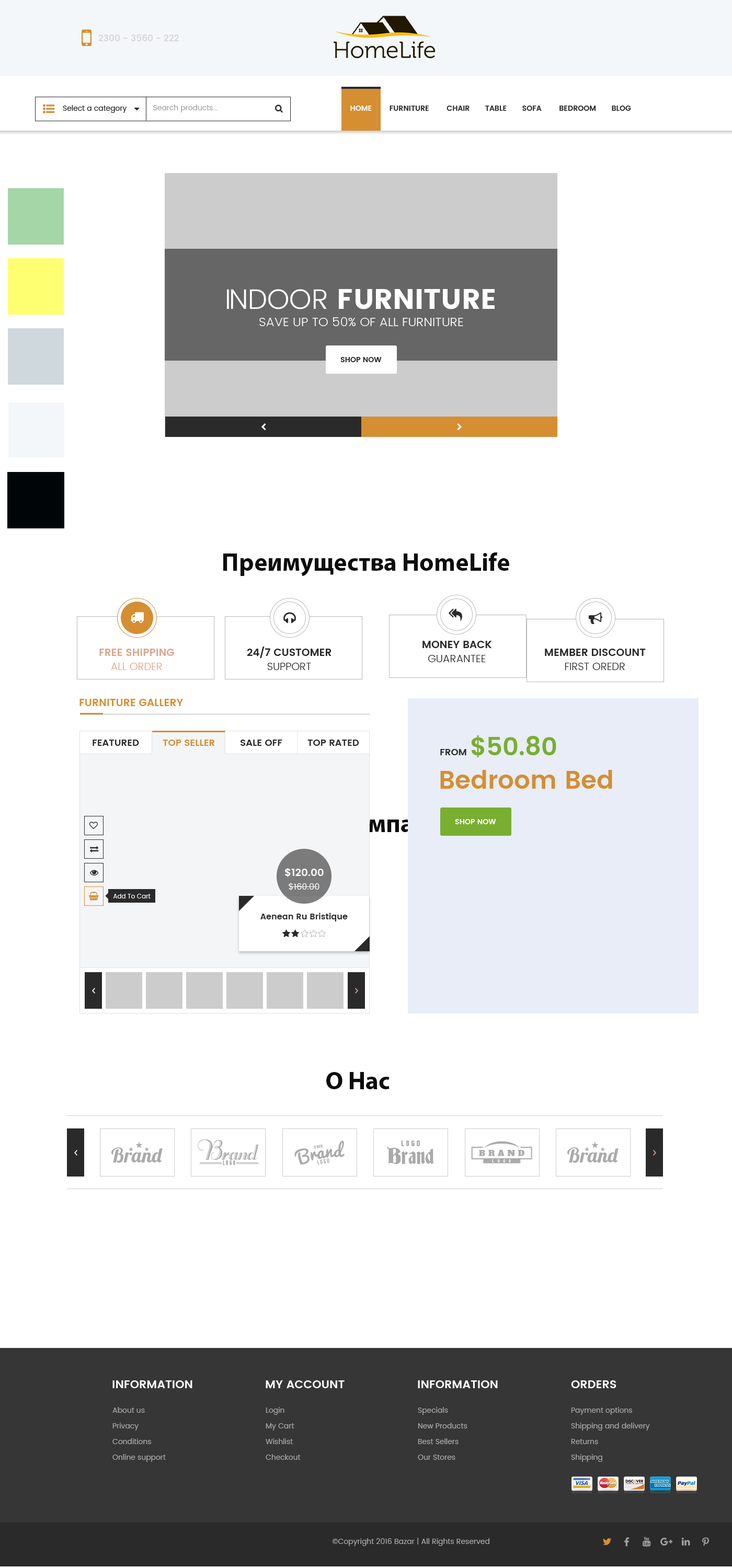
<style>
.page{position:relative;width:732px;height:1568px;background:#ffffff}
.page>*{position:absolute;margin:0}
.t1{font:8.9px "Poppins-SemiBold";color:#d8d8d8}
.t2{font:7.3px "Poppins-Regular";color:#2a2a2a}
.t3{font:7.3px "Poppins-Regular";color:#a4a4a4}
.t4{font:7.3px "Poppins-SemiBold";color:#2a2a2a;text-transform:uppercase}
.t5{font:7.3px "Poppins-SemiBold";color:#ffffff;text-transform:uppercase}
.t6{font:28.2px "Poppins";color:#ffffff;text-transform:uppercase}
.t7{font:28.2px "Poppins-Light";letter-spacing:-0.086em;color:#ffffff;text-transform:uppercase}
.t8{font:28.2px "Poppins-Light";color:#ffffff;text-transform:uppercase}
.t9{font:12.5px "Poppins-Light";color:#ffffff;text-transform:uppercase}
.t10{font:25.1px "MyriadPro-Bold";color:#0c0d0c}
.t11{font:10.5px/14.1px "Poppins-SemiBold";color:#2a2a2a;text-transform:uppercase}
.t12{font:10.5px/14.1px "Poppins-Light";color:#2a2a2a;text-transform:uppercase}
.t13{font:10.5px/14.1px "Poppins-SemiBold";color:#e0a38e;text-transform:uppercase}
.t14{font:10.5px/14.1px "Poppins-Light";color:#e0a38e;text-transform:uppercase}
.t15{font:10.5px "Poppins-SemiBold";color:#d58e32;text-transform:uppercase}
.t16{font:25.1px "Poppins-SemiBold";color:#79ae30;text-transform:uppercase}
.t17{font:9.4px "Poppins-SemiBold";color:#2a2a2a;text-transform:uppercase}
.t18{font:9.4px "Poppins-SemiBold";color:#d58e32;text-transform:uppercase}
.t19{font:25.1px "Poppins-SemiBold";color:#d58e32}
.t20{font:25.1px "MyriadPro-Bold"}
.t21{font:10.5px "Poppins-SemiBold";color:#ffffff;text-transform:uppercase}
.t22{font:6.3px "Poppins-Regular";color:#ffffff}
.t23{font:8.4px "Poppins-Regular";color:#ffffff}
.t24{font:8.4px "Poppins-SemiBold";color:#2a2a2a}
.t25{font:11.5px "Poppins-SemiBold";color:#ffffff}
.t26{font:11.5px "Poppins-SemiBold";color:#ffffff;text-transform:uppercase}
.t27{font:7.3px/15.7px "Poppins-Regular";color:#a9a9a9}
.t28{font:7.3px "Poppins-Regular";color:#a9a9a9}
</style>
<div class="page">
<p class="t1" style="left:98px;top:34px;width:81px;height:7px">2300 - 3560 - 222</p>
<p class="t2" style="left:63px;top:105px;width:64px;height:8px">Select a category</p>
<p class="t3" style="left:153px;top:105px;width:65px;height:7px">Search products...</p>
<p class="t4" style="left:350px;top:106px;width:281px;height:5px"><span class="t5">home        </span>furniture        chair       table       sofa        bedroom       blog</p>
<p class="t6" style="left:227px;top:289px;width:267px;height:20px"><span class="t7">i</span><span class="t8">ndoor</span> furniture</p>
<p class="t9" style="left:259px;top:317px;width:204px;height:9px">save up to 50% of all furniture</p>
<p class="t4" style="left:340px;top:357px;width:42px;height:5px">shop now</p>
<p class="t10" style="left:223px;top:552px;width:286px;height:24px">Преимущества HomeLife</p>
<p class="t11" style="left:422px;top:641px;width:70px;height:21px;text-align:center">money back<br><span class="t12">guarantee</span></p>
<p class="t13" style="left:99px;top:649px;width:75px;height:21px;text-align:center">Free Shipping<br><span class="t14">all order</span></p>
<p class="t11" style="left:247px;top:647px;width:84px;height:23px;text-align:center">24/7 customer<br><span class="t12">support</span></p>
<p class="t11" style="left:545px;top:649px;width:100px;height:21px;text-align:center">MEMBER DISCOUNT<br><span class="t12">first oredr</span></p>
<p class="t15" style="left:79px;top:699px;width:104px;height:7px">furniture gallery</p>
<p class="t16" style="left:440px;top:735px;width:116px;height:22px"><span class="t17">FROM </span>$50.80</p>
<p class="t17" style="left:93px;top:740px;width:46px;height:6px">featured</p>
<p class="t18" style="left:163px;top:740px;width:52px;height:6px">top seller</p>
<p class="t17" style="left:240px;top:740px;width:42px;height:6px">sale off</p>
<p class="t17" style="left:307px;top:740px;width:52px;height:6px">top rated</p>
<p class="t19" style="left:440px;top:770px;width:172px;height:19px">Bedroom Bed</p>
<p class="t20" style="left:258px;top:815px;width:199px;height:22px">Услуги компании</p>
<p class="t5" style="left:455px;top:819px;width:41px;height:5px">shop now</p>
<p class="t21" style="left:285px;top:868px;width:39px;height:9px">$120.00</p>
<p class="t22" style="left:113px;top:894px;width:38px;height:4px">Add To Cart</p>
<p class="t23" style="left:289px;top:883px;width:30px;height:7px">$160.00</p>
<p class="t24" style="left:260px;top:913px;width:88px;height:8px">Aenean Ru Bristique</p>
<p class="t10" style="left:326px;top:1072px;width:63px;height:17px">О Нас</p>
<p class="t25" style="left:112px;top:1380px;width:80px;height:8px">INFORMATION</p>
<p class="t26" style="left:266px;top:1380px;width:78px;height:8px">MY ACCOUNT</p>
<p class="t26" style="left:418px;top:1380px;width:80px;height:8px">INFORMATION</p>
<p class="t26" style="left:571px;top:1380px;width:45px;height:8px">ORDERS</p>
<p class="t27" style="left:112px;top:1407px;width:54px;height:55px">About us<br>Privacy<br>Conditions<br>Online support</p>
<p class="t27" style="left:266px;top:1407px;width:35px;height:53px">Login<br>My Cart<br>Wishlist<br>Checkout</p>
<p class="t27" style="left:418px;top:1407px;width:49px;height:53px">Specials<br>New Products<br>Best Sellers<br>Our Stores</p>
<p class="t27" style="left:571px;top:1407px;width:79px;height:55px">Payment options<br>Shipping and delivery<br>Returns<br>Shipping</p>
<p class="t28" style="left:332px;top:1538px;width:157px;height:8px">©Copyright 2016 Bazar | All Rights Reserved</p>
</div>
